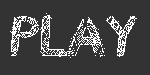
<style>
.page{position:relative;width:150px;height:75px;background:#333333}
.page>*{position:absolute;margin:0}
.t1{font:56.9px "Drawing-Guides";color:#ffffff;scale:1.22 1}
</style>
<div class="page">
<p class="t1" style="left:10px;top:13px;width:127px;height:45px">play</p>
</div>
